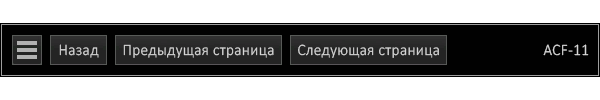
<style>
.page{position:relative;width:600px;height:100px;background:#ffffff}
.page>*{position:absolute;margin:0}
.t1{font:16px "Calibri-Light";letter-spacing:0.02em;color:#d7d7d7;scale:0.96 1}
</style>
<div class="page">
<p class="t1" style="left:59px;top:44px;width:40px;height:14px">Назад</p>
<p class="t1" style="left:123px;top:44px;width:151px;height:14px">Предыдущая страница</p>
<p class="t1" style="left:298px;top:44px;width:141px;height:14px">Следующая страница</p>
<p class="t1" style="left:543px;top:44px;width:46px;height:12px">ACF-11</p>
</div>
